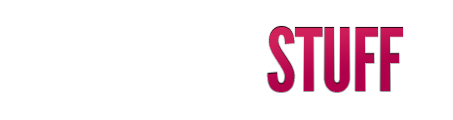
<style>
.page{position:relative;width:453px;height:120px;background:#ffffff}
.page>*{position:absolute;margin:0}
.t1{font:87.6px "LeagueGothic";letter-spacing:-0.015em;color:#b9094f;text-transform:uppercase}
</style>
<div class="page">
<p class="t1" style="left:267px;top:26px;width:136px;height:66px">Stuff</p>
</div>
